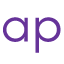
<style>
.page{position:relative;width:64px;height:64px;background:#ffffff}
.page>*{position:absolute;margin:0}
.t1{font:58.3px "JosefinSans";color:#663399}
</style>
<div class="page">
<p class="t1" style="left:3px;top:17px;width:58px;height:36px">ap</p>
</div>
